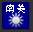
<style>
.page{position:relative;width:33px;height:32px;background:#000090}
.page>*{position:absolute;margin:0}
.t1{font:10.4px "SimSun";color:#ffffff}
</style>
<div class="page">
<p class="t1" style="left:6px;top:4px;width:19px;height:9px">南美</p>
</div>
